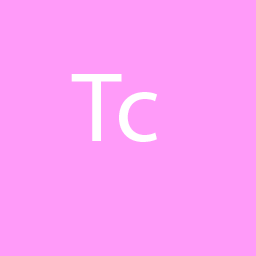
<style>
.page{position:relative;width:256px;height:256px;background:#ff9bf9}
.page>*{position:absolute;margin:0}
.t1{font:100px "MyriadPro-Regular";color:#ffffff}
</style>
<div class="page">
<p class="t1" style="left:71px;top:74px;width:86px;height:68px">Tc</p>
</div>
